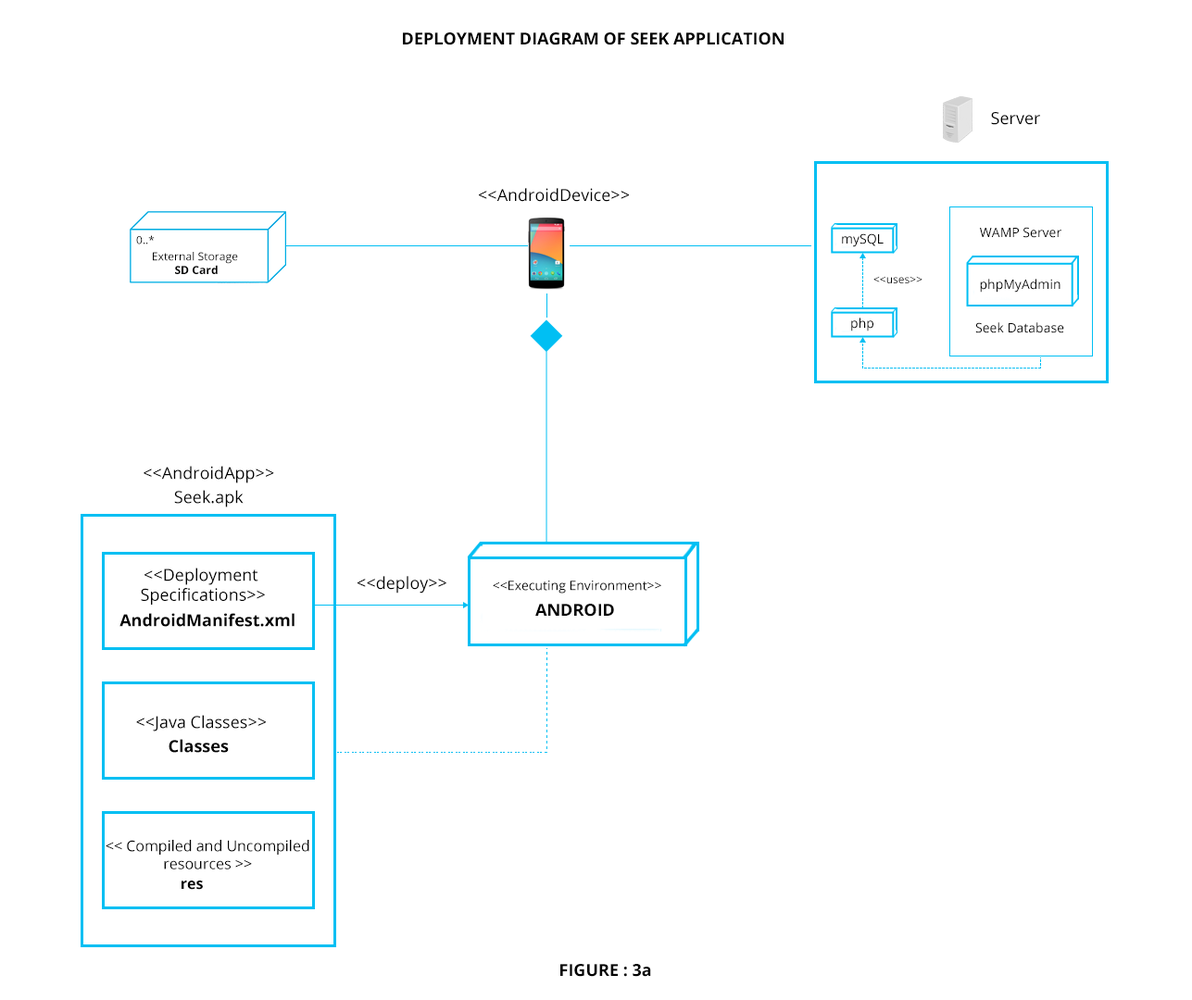
<style>
.page{position:relative;width:1192px;height:1000px;background:#ffffff}
.page>*{position:absolute;margin:0}
.t1{font:16.7px "OpenSans-Bold";color:#000000}
.t2{font:16.7px "OpenSans";color:#000000}
.t3{font:13px "OpenSans";color:#000000}
.t4{font:11.1px "OpenSans";color:#000000}
.t5{font:11.3px "OpenSans";color:#000000}
.t6{font:11.3px "OpenSans-Bold";color:#000000}
.t7{font:14.8px "OpenSans";color:#000000}
.t8{font:14.8px "OpenSans-Bold";color:#000000}
</style>
<div class="page">
<p class="t1" style="left:403px;top:32px;width:381px;height:13px">DEPLOYMENT DIAGRAM OF SEEK APPLICATION</p>
<p class="t2" style="left:991px;top:112px;width:49px;height:13px">Server</p>
<p class="t2" style="left:479px;top:188px;width:150px;height:14px">&lt;&lt;AndroidDevice&gt;&gt;</p>
<p class="t3" style="left:842px;top:233px;width:42px;height:14px">mySQL</p>
<p class="t3" style="left:980px;top:227px;width:81px;height:11px">WAMP Server</p>
<p class="t4" style="left:136px;top:235px;width:19px;height:10px">0..*</p>
<p class="t5" style="left:153px;top:252px;width:85px;height:22px;text-align:center">External Storage <br><span class="t6">SD Card</span></p>
<p class="t4" style="left:873px;top:276px;width:50px;height:7px">&lt;&lt;uses&gt;&gt;</p>
<p class="t3" style="left:980px;top:279px;width:81px;height:14px">phpMyAdmin</p>
<p class="t3" style="left:851px;top:318px;width:22px;height:14px">php</p>
<p class="t3" style="left:975px;top:322px;width:89px;height:11px">Seek Database</p>
<p class="t2" style="left:144px;top:466px;width:130px;height:17px">&lt;&lt;AndroidApp&gt;&gt;</p>
<p class="t2" style="left:174px;top:490px;width:70px;height:18px">Seek.apk</p>
<p class="t2" style="left:141px;top:568px;width:124px;height:37px;text-align:center">&lt;&lt;Deployment <br>Specifications&gt;&gt;</p>
<p class="t2" style="left:358px;top:576px;width:88px;height:18px">&lt;&lt;deploy&gt;&gt;</p>
<p class="t3" style="left:493px;top:581px;width:168px;height:13px">&lt;&lt;Executing Environment&gt;&gt;</p>
<p class="t1" style="left:535px;top:604px;width:79px;height:13px">ANDROID</p>
<p class="t1" style="left:119px;top:613px;width:176px;height:14px">AndroidManifest.xml</p>
<p class="t2" style="left:136px;top:715px;width:130px;height:17px">&lt;&lt;Java Classes&gt;&gt;</p>
<p class="t1" style="left:169px;top:739px;width:60px;height:14px">Classes</p>
<p class="t7" style="left:106px;top:840px;width:203px;height:30px;text-align:center">&lt;&lt; Compiled and Uncompiled<br>resources &gt;&gt;</p>
<p class="t8" style="left:182px;top:881px;width:21px;height:9px">res</p>
<p class="t1" style="left:560px;top:964px;width:91px;height:13px">FIGURE : 3a</p>
</div>
